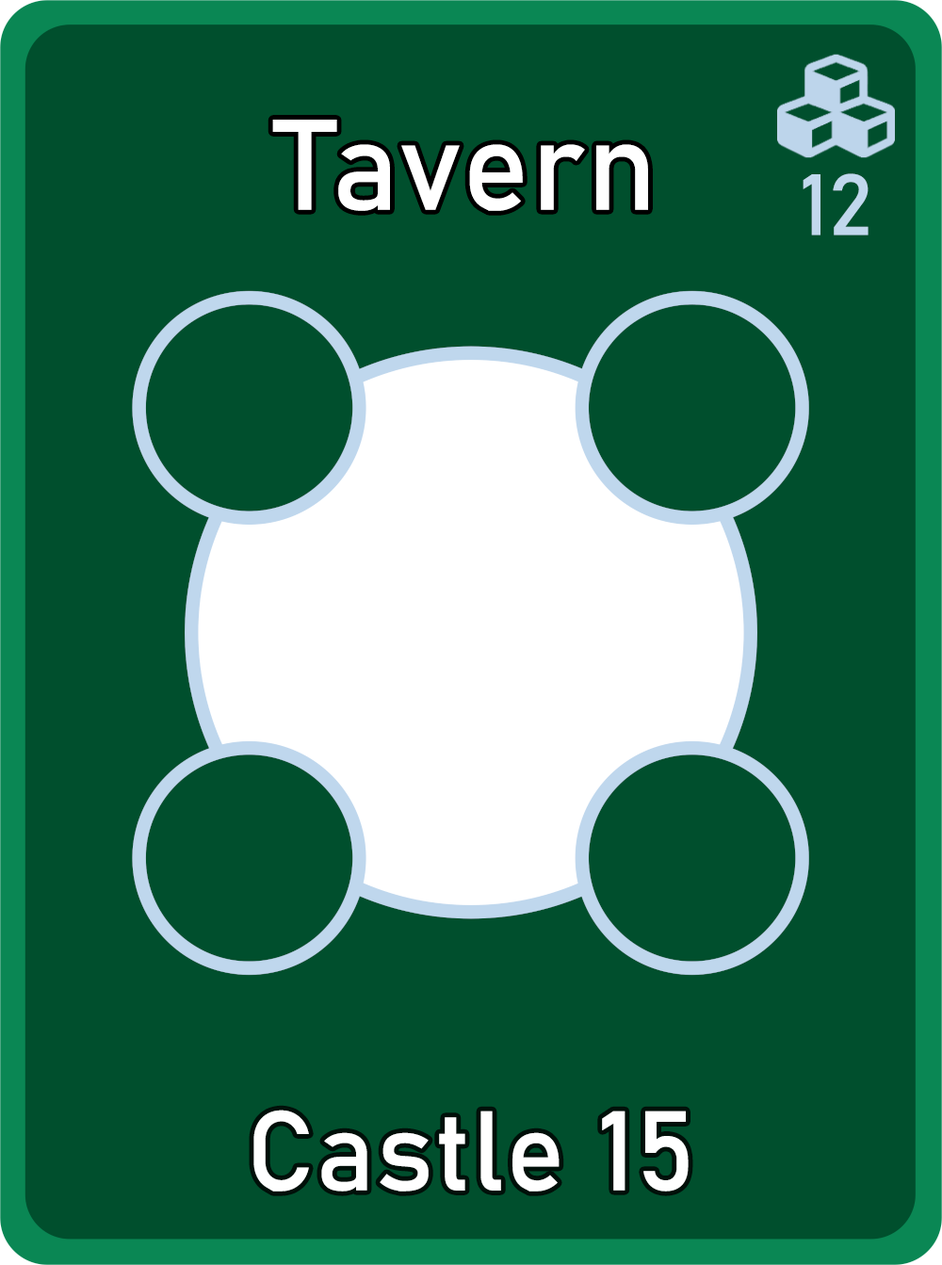
<style>
.page{position:relative;width:942px;height:1265px;background:#004f2d}
.page>*{position:absolute;margin:0}
.t1{font:126.7px "Bahnschrift";letter-spacing:0.01em;color:#ffffff}
.t2{font:85px "Bahnschrift";letter-spacing:0.01em;color:#c1d8ed}
.t3{font:111.3px "Bahnschrift";letter-spacing:0.01em;color:#ffffff}
</style>
<div class="page">
<p class="t1" style="left:272px;top:120px;width:376px;height:91px">Tavern</p>
<p class="t2" style="left:803px;top:173px;width:66px;height:63px">12</p>
<p class="t3" style="left:253px;top:1110px;width:436px;height:82px">Castle 15</p>
</div>
